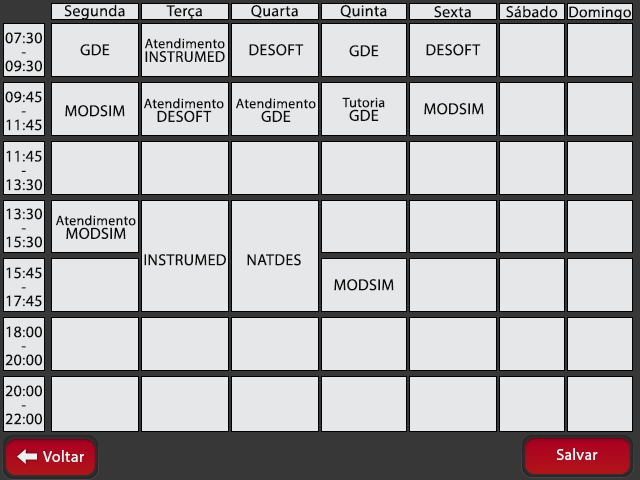
<style>
.page{position:relative;width:640px;height:480px;background:#e6e7e8}
.page>*{position:absolute;margin:0}
.t1{font:16px "MyriadPro-Regular";letter-spacing:0.02em;color:#0e0e0e}
.t2{font:15.5px "MyriadPro-Regular";letter-spacing:0.02em;color:#0e0e0e}
.t3{font:16px/14px "MyriadPro-Regular";letter-spacing:0.02em;color:#0e0e0e}
.t4{font:14px/13.6px "MyriadPro-Regular";letter-spacing:0.02em;color:#0e0e0e}
.t5{font:15.5px/13.6px "MyriadPro-Regular";letter-spacing:0.02em;color:#0e0e0e}
.t6{font:16px/13.6px "MyriadPro-Regular";letter-spacing:0.02em;color:#0e0e0e}
.t7{font:16.3px/14.3px "MyriadPro-Regular";letter-spacing:0.02em;color:#0e0e0e}
.t8{font:16px "MyriadPro-Regular";letter-spacing:0.02em;color:#ffffff}
</style>
<div class="page">
<p class="t1" style="left:64px;top:4px;width:61px;height:16px">Segunda</p>
<p class="t1" style="left:166px;top:5px;width:36px;height:15px">Terça</p>
<p class="t1" style="left:251px;top:5px;width:47px;height:13px">Quarta</p>
<p class="t1" style="left:340px;top:5px;width:47px;height:13px">Quinta</p>
<p class="t1" style="left:434px;top:6px;width:37px;height:12px">Sexta</p>
<p class="t1" style="left:506px;top:5px;width:52px;height:13px">Sábado</p>
<p class="t2" style="left:569px;top:6px;width:62px;height:15px">Domingo</p>
<p class="t3" style="left:5px;top:32px;width:37px;height:40px;text-align:center">07:30<br>-<br>09:30</p>
<p class="t4" style="left:145px;top:38px;width:80px;height:24px;text-align:center">Atendimento<br><span class="t5">INSTRUMED</span></p>
<p class="t1" style="left:80px;top:44px;width:30px;height:12px">GDE</p>
<p class="t1" style="left:249px;top:44px;width:55px;height:12px">DESOFT</p>
<p class="t1" style="left:349px;top:45px;width:30px;height:12px">GDE</p>
<p class="t1" style="left:426px;top:44px;width:55px;height:12px">DESOFT</p>
<p class="t3" style="left:5px;top:91px;width:37px;height:40px;text-align:center">09:45<br>-<br>11:45</p>
<p class="t4" style="left:144px;top:98px;width:80px;height:24px;text-align:center">Atendimento<br><span class="t6">DESOFT</span></p>
<p class="t4" style="left:236px;top:98px;width:80px;height:24px;text-align:center">Atendimento<br><span class="t6">GDE</span></p>
<p class="t4" style="left:342px;top:97px;width:43px;height:24px;text-align:center">Tutoria<br><span class="t6">GDE</span></p>
<p class="t1" style="left:65px;top:105px;width:60px;height:12px">MODSIM</p>
<p class="t1" style="left:424px;top:103px;width:60px;height:12px">MODSIM</p>
<p class="t7" style="left:6px;top:150px;width:36px;height:41px;text-align:center">11:45<br>-<br>13:30</p>
<p class="t3" style="left:6px;top:208px;width:36px;height:40px;text-align:center">13:30<br>-<br>15:30</p>
<p class="t4" style="left:56px;top:215px;width:80px;height:24px;text-align:center">Atendimento<br><span class="t6">MODSIM</span></p>
<p class="t1" style="left:144px;top:254px;width:82px;height:12px">INSTRUMED</p>
<p class="t1" style="left:247px;top:254px;width:54px;height:12px">NATDES</p>
<p class="t3" style="left:6px;top:267px;width:36px;height:40px;text-align:center">15:45<br>-<br>17:45</p>
<p class="t1" style="left:334px;top:279px;width:60px;height:12px">MODSIM</p>
<p class="t3" style="left:5px;top:326px;width:37px;height:40px;text-align:center">18:00<br>-<br>20:00</p>
<p class="t3" style="left:5px;top:385px;width:37px;height:40px;text-align:center">20:00<br>-<br>22:00</p>
<p class="t8" style="left:556px;top:448px;width:42px;height:12px">Salvar</p>
<p class="t8" style="left:43px;top:450px;width:41px;height:12px">Voltar</p>
</div>
